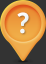
<style>
.page{position:relative;width:46px;height:64px;background:#333333}
.page>*{position:absolute;margin:0}
.t1{font:27.8px "Lato-Bold";color:#ffffff}
</style>
<div class="page">
<p class="t1" style="left:17px;top:12px;width:12px;height:22px">?</p>
</div>
